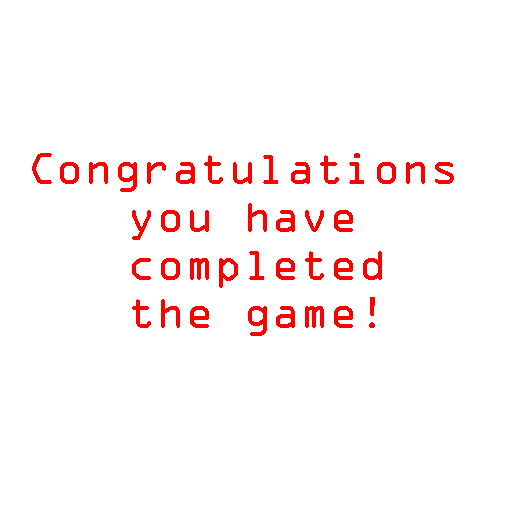
<style>
.page{position:relative;width:512px;height:512px;background:#ffffff}
.page>*{position:absolute;margin:0}
.t1{font:40px "OCRAStd";color:#ff0000}
</style>
<div class="page">
<p class="t1" style="left:32px;top:153px;width:422px;height:183px;text-align:center">Congratulations <br>you have <br>completed<br>the game!</p>
</div>
